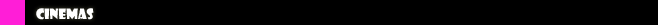
<style>
.page{position:relative;width:658px;height:25px;background:#000000}
.page>*{position:absolute;margin:0}
.t1{font:14px "ShowcardGothic-Reg";color:#ffffff}
</style>
<div class="page">
<p class="t1" style="left:36px;top:8px;width:58px;height:12px">Cinemas</p>
</div>
